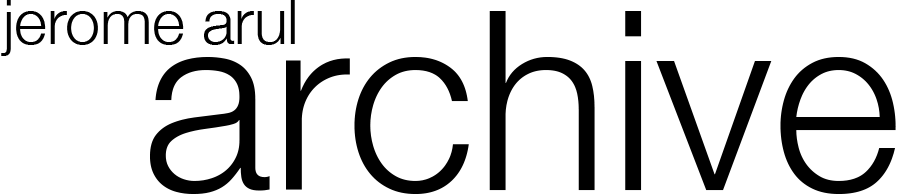
<style>
.page{position:relative;width:900px;height:194px;background:#ffffff}
.page>*{position:absolute;margin:0}
.t1{font:62.5px/175px "HelveticaNeue-Light";color:#000000}
.t2{font:250px/145.8px "HelveticaNeue-Light";color:#000000}
</style>
<div class="page">
<p class="t1" style="left:1px;top:0px;width:895px;height:194px">jerome arul<br><span class="t2">  archive</span></p>
</div>
